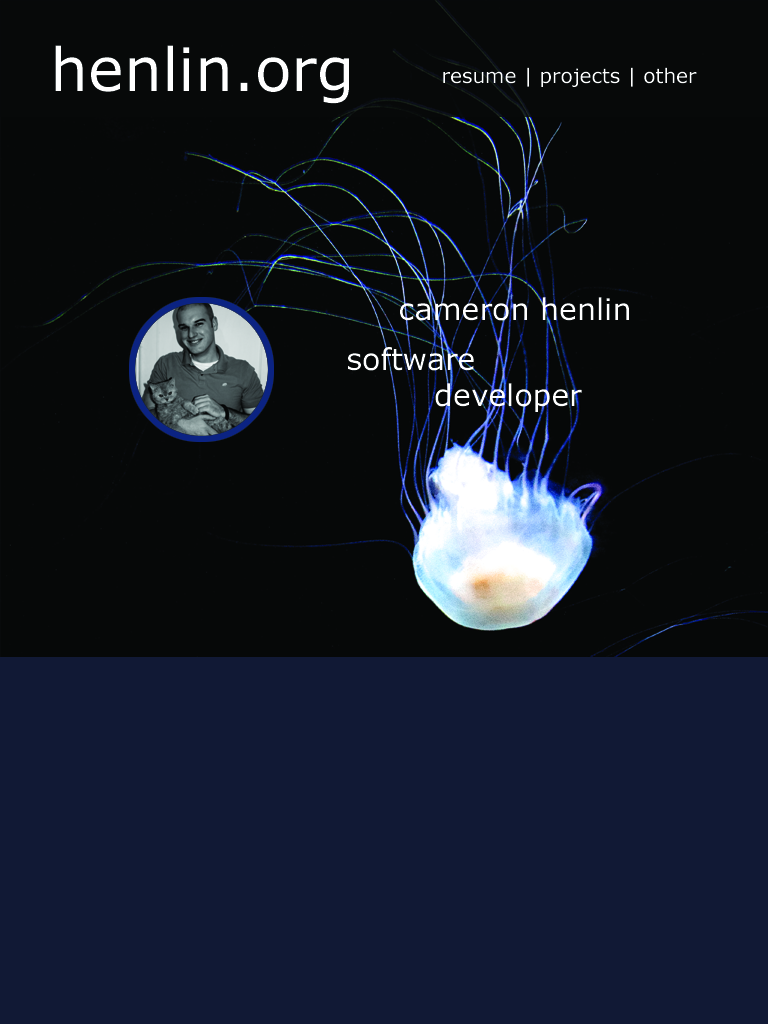
<style>
.page{position:relative;width:768px;height:1024px;background:#060808}
.page>*{position:absolute;margin:0}
.t1{font:60px "Verdana";color:#ffffff}
.t2{font:20px "Verdana";color:#ffffff}
.t3{font:30px "Verdana";color:#ffffff}
</style>
<div class="page">
<p class="t1" style="left:55px;top:45px;width:294px;height:59px">henlin.org</p>
<p class="t2" style="left:443px;top:67px;width:254px;height:20px">resume | projects | other</p>
<p class="t3" style="left:400px;top:297px;width:229px;height:24px">cameron henlin</p>
<p class="t3" style="left:348px;top:347px;width:234px;height:65px;text-align:center">software<br>                developer</p>
</div>
